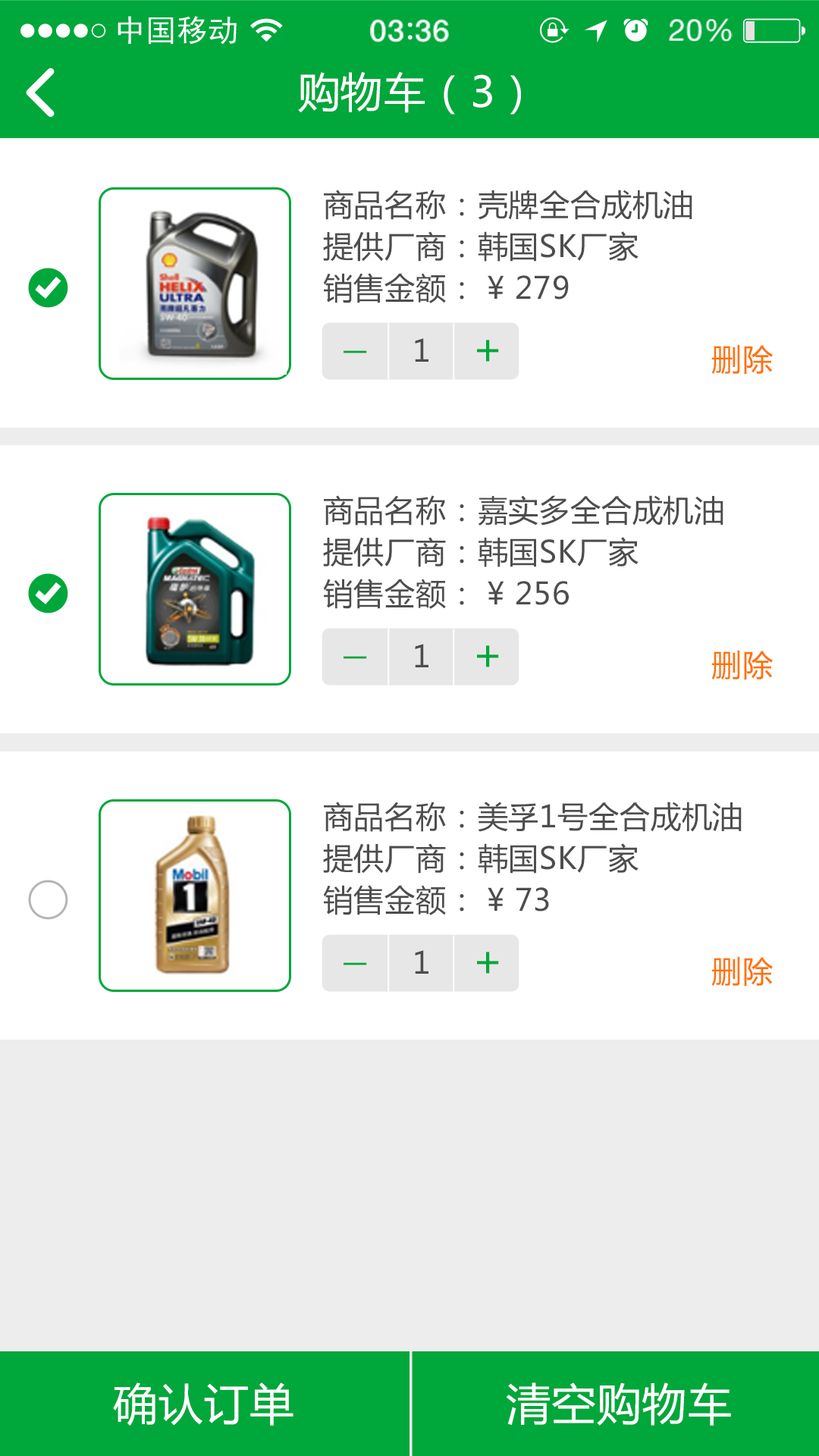
<style>
.page{position:relative;width:819px;height:1456px;background:#ffffff}
.page>*{position:absolute;margin:0}
.t1{font:41.7px "MicrosoftYaHei";letter-spacing:0.02em;color:#ffffff}
.t2{font:30.3px/41.7px "MicrosoftYaHei";letter-spacing:0.02em;color:#4d4d4d}
.t3{font:30.3px "MicrosoftYaHei";letter-spacing:0.02em;color:#4d4d4d}
.t4{font:42.9px "MicrosoftYaHei";letter-spacing:0.02em;color:#00a73b}
.t5{font:36.6px "MicrosoftYaHei";letter-spacing:0.02em;color:#00a73b;scale:1.4 1}
.t6{font:30.3px "MicrosoftYaHei";letter-spacing:0.02em;color:#ff7200}
.t7{font:44px "MicrosoftYaHei";letter-spacing:0.02em;color:#ffffff}
</style>
<div class="page">
<p class="t1" style="left:298px;top:72px;width:223px;height:43px">购物车（3）</p>
<p class="t2" style="left:323px;top:190px;width:369px;height:113px">商品名称：壳牌全合成机油<br>提供厂商：韩国SK厂家<br>销售金额： ¥ 279</p>
<p class="t3" style="left:415px;top:338px;width:13px;height:24px">1</p>
<p class="t4" style="left:477px;top:340px;width:22px;height:22px">+</p>
<p class="t5" style="left:344px;top:350px;width:23px;height:3px">_</p>
<p class="t6" style="left:711px;top:344px;width:62px;height:31px">删除</p>
<p class="t2" style="left:323px;top:495px;width:400px;height:114px">商品名称：嘉实多全合成机油<br>提供厂商：韩国SK厂家<br>销售金额： ¥ 256</p>
<p class="t3" style="left:415px;top:644px;width:13px;height:23px">1</p>
<p class="t4" style="left:477px;top:645px;width:22px;height:22px">+</p>
<p class="t6" style="left:711px;top:650px;width:62px;height:30px">删除</p>
<p class="t5" style="left:344px;top:656px;width:23px;height:3px">_</p>
<p class="t2" style="left:323px;top:802px;width:419px;height:113px">商品名称：美孚1号全合成机油<br>提供厂商：韩国SK厂家<br>销售金额： ¥ 73</p>
<p class="t3" style="left:415px;top:950px;width:13px;height:24px">1</p>
<p class="t4" style="left:477px;top:952px;width:22px;height:22px">+</p>
<p class="t5" style="left:344px;top:962px;width:23px;height:3px">_</p>
<p class="t6" style="left:711px;top:956px;width:62px;height:31px">删除</p>
<p class="t7" style="left:113px;top:1382px;width:180px;height:44px">确认订单</p>
<p class="t7" style="left:506px;top:1382px;width:225px;height:44px">清空购物车</p>
</div>
